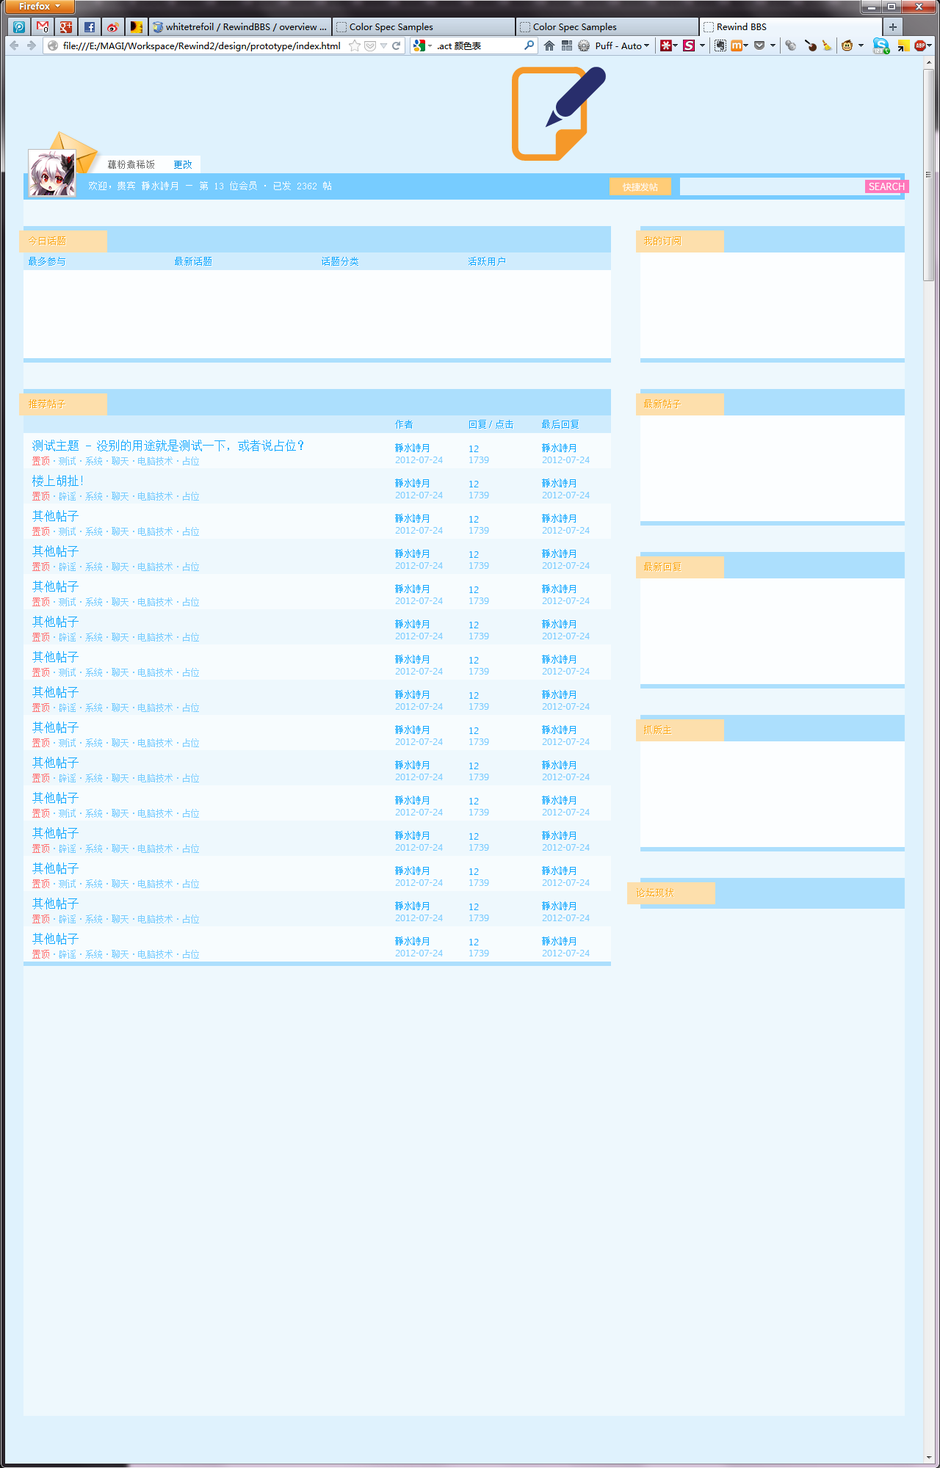
<style>
.page{position:relative;width:940px;height:1468px;background:#eef8fd}
.page>*{position:absolute;margin:0}
.t1{font:9.5px "SimSun";color:#6e6e6e}
.t2{font:9.5px "SimSun";color:#008add}
.t3{font:9.5px "SimSun";color:#fcfeff}
.t4{font:8.8px "MicrosoftYaHei";color:#ffffff}
.t5{font:9.8px "EuphemiaCAS";color:#ffffff}
.t6{font:9.5px "SimSun";color:#fca714}
.t7{font:9.8px "SimSun";color:#ffffff}
.t8{font:9.4px "SimSun";color:#fca714;scale:1.03 1}
.t9{font:9.4px "SimSun";color:#ffffff;scale:1.03 1}
.t10{font:9.8px "SimSun";color:#12a8ff}
.t11{font:9.8px "SimSun";color:#fca714}
.t12{font:9.8px "ArialMT";color:#12a8ff}
.t13{font:9.8px "ArialMT";color:#ffffff}
.t14{font:11.7px "SimSun";color:#12a8ff}
.t15{font:8.8px "SimSun";color:#12a8ff}
.t16{font:9px "EuphemiaCAS";color:#12a8ff}
.t17{font:8.8px "SimSun";color:#77ccff}
.t18{font:8.8px "SimSun";color:#ff7777}
.t19{font:9px "EuphemiaCAS";color:#77ccff}
</style>
<div class="page">
<p class="t1" style="left:108px;top:160px;width:46px;height:9px">藕粉煮稀饭</p>
<p class="t2" style="left:174px;top:160px;width:18px;height:9px">更改</p>
<p class="t3" style="left:89px;top:181px;width:242px;height:9px">欢迎，贵宾 靜水詩月 — 第 13 位会员·已发 2362 帖</p>
<p class="t4" style="left:622px;top:183px;width:36px;height:9px">快捷发帖</p>
<p class="t5" style="left:868px;top:183px;width:36px;height:7px">SEARCH</p>
<p class="t6" style="left:29px;top:236px;width:36px;height:9px">今日话题</p>
<p class="t7" style="left:29px;top:237px;width:37px;height:9px">今日话题</p>
<p class="t8" style="left:644px;top:236px;width:36px;height:9px">我的订阅</p>
<p class="t9" style="left:644px;top:237px;width:37px;height:9px">我的订阅</p>
<p class="t10" style="left:29px;top:257px;width:36px;height:9px">最多参与</p>
<p class="t10" style="left:175px;top:257px;width:36px;height:9px">最新话题</p>
<p class="t7" style="left:175px;top:258px;width:37px;height:8px">最新话题</p>
<p class="t10" style="left:322px;top:257px;width:36px;height:9px">话题分类</p>
<p class="t10" style="left:468px;top:257px;width:37px;height:9px">活跃用户</p>
<p class="t11" style="left:29px;top:399px;width:36px;height:9px">推荐帖子</p>
<p class="t7" style="left:29px;top:400px;width:37px;height:9px">推荐帖子</p>
<p class="t11" style="left:644px;top:399px;width:36px;height:9px">最新帖子</p>
<p class="t7" style="left:644px;top:400px;width:37px;height:9px">最新帖子</p>
<p class="t10" style="left:395px;top:420px;width:18px;height:9px">作者</p>
<p class="t7" style="left:396px;top:421px;width:17px;height:8px">作者</p>
<p class="t10" style="left:469px;top:420px;width:44px;height:9px">回复<span class="t12">/</span>点击</p>
<p class="t7" style="left:470px;top:421px;width:44px;height:8px">回复<span class="t13">/</span>点击</p>
<p class="t10" style="left:542px;top:420px;width:36px;height:9px">最后回复</p>
<p class="t7" style="left:542px;top:421px;width:37px;height:8px">最后回复</p>
<p class="t14" style="left:32px;top:440px;width:271px;height:11px">测试主题 - 没别的用途就是测试一下，或者说占位？</p>
<p class="t15" style="left:395px;top:443px;width:34px;height:9px">靜水詩月</p>
<p class="t16" style="left:469px;top:446px;width:10px;height:6px">12</p>
<p class="t15" style="left:542px;top:443px;width:33px;height:9px">靜水詩月</p>
<p class="t17" style="left:32px;top:457px;width:167px;height:8px"><span class="t18">置顶</span>·测试·系统·聊天·电脑技术·占位</p>
<p class="t19" style="left:395px;top:457px;width:48px;height:6px">2012-07-24</p>
<p class="t19" style="left:469px;top:457px;width:20px;height:6px">1739</p>
<p class="t19" style="left:542px;top:457px;width:47px;height:6px">2012-07-24</p>
<p class="t14" style="left:32px;top:475px;width:50px;height:12px">楼上胡扯！</p>
<p class="t15" style="left:395px;top:479px;width:34px;height:8px">靜水詩月</p>
<p class="t16" style="left:469px;top:481px;width:10px;height:6px">12</p>
<p class="t15" style="left:542px;top:479px;width:33px;height:8px">靜水詩月</p>
<p class="t17" style="left:32px;top:492px;width:167px;height:9px"><span class="t18">置顶</span>·辟谣·系统·聊天·电脑技术·占位</p>
<p class="t19" style="left:395px;top:492px;width:48px;height:6px">2012-07-24</p>
<p class="t19" style="left:469px;top:492px;width:20px;height:6px">1739</p>
<p class="t19" style="left:542px;top:492px;width:47px;height:6px">2012-07-24</p>
<p class="t14" style="left:32px;top:510px;width:47px;height:12px">其他帖子</p>
<p class="t15" style="left:395px;top:514px;width:34px;height:9px">靜水詩月</p>
<p class="t16" style="left:469px;top:516px;width:10px;height:7px">12</p>
<p class="t15" style="left:542px;top:514px;width:33px;height:9px">靜水詩月</p>
<p class="t17" style="left:32px;top:527px;width:167px;height:9px"><span class="t18">置顶</span>·测试·系统·聊天·电脑技术·占位</p>
<p class="t19" style="left:395px;top:527px;width:48px;height:7px">2012-07-24</p>
<p class="t19" style="left:469px;top:527px;width:20px;height:7px">1739</p>
<p class="t19" style="left:542px;top:527px;width:47px;height:7px">2012-07-24</p>
<p class="t14" style="left:32px;top:545px;width:47px;height:12px">其他帖子</p>
<p class="t15" style="left:395px;top:549px;width:34px;height:9px">靜水詩月</p>
<p class="t16" style="left:469px;top:551px;width:10px;height:7px">12</p>
<p class="t15" style="left:542px;top:549px;width:33px;height:9px">靜水詩月</p>
<p class="t17" style="left:32px;top:562px;width:167px;height:9px"><span class="t18">置顶</span>·辟谣·系统·聊天·电脑技术·占位</p>
<p class="t19" style="left:395px;top:562px;width:48px;height:7px">2012-07-24</p>
<p class="t19" style="left:469px;top:562px;width:20px;height:7px">1739</p>
<p class="t19" style="left:542px;top:562px;width:47px;height:7px">2012-07-24</p>
<p class="t11" style="left:644px;top:562px;width:36px;height:9px">最新回复</p>
<p class="t7" style="left:644px;top:563px;width:37px;height:9px">最新回复</p>
<p class="t14" style="left:32px;top:581px;width:47px;height:11px">其他帖子</p>
<p class="t15" style="left:395px;top:584px;width:34px;height:9px">靜水詩月</p>
<p class="t16" style="left:469px;top:586px;width:10px;height:7px">12</p>
<p class="t15" style="left:542px;top:584px;width:33px;height:9px">靜水詩月</p>
<p class="t17" style="left:32px;top:598px;width:167px;height:8px"><span class="t18">置顶</span>·测试·系统·聊天·电脑技术·占位</p>
<p class="t19" style="left:395px;top:598px;width:48px;height:6px">2012-07-24</p>
<p class="t19" style="left:469px;top:598px;width:20px;height:6px">1739</p>
<p class="t19" style="left:542px;top:598px;width:47px;height:6px">2012-07-24</p>
<p class="t14" style="left:32px;top:616px;width:47px;height:12px">其他帖子</p>
<p class="t15" style="left:395px;top:620px;width:34px;height:8px">靜水詩月</p>
<p class="t16" style="left:469px;top:622px;width:10px;height:6px">12</p>
<p class="t15" style="left:542px;top:620px;width:33px;height:8px">靜水詩月</p>
<p class="t17" style="left:32px;top:633px;width:167px;height:9px"><span class="t18">置顶</span>·辟谣·系统·聊天·电脑技术·占位</p>
<p class="t19" style="left:395px;top:633px;width:48px;height:6px">2012-07-24</p>
<p class="t19" style="left:469px;top:633px;width:20px;height:6px">1739</p>
<p class="t19" style="left:542px;top:633px;width:47px;height:6px">2012-07-24</p>
<p class="t14" style="left:32px;top:651px;width:47px;height:12px">其他帖子</p>
<p class="t15" style="left:395px;top:655px;width:34px;height:9px">靜水詩月</p>
<p class="t16" style="left:469px;top:657px;width:10px;height:7px">12</p>
<p class="t15" style="left:542px;top:655px;width:33px;height:9px">靜水詩月</p>
<p class="t17" style="left:32px;top:668px;width:167px;height:9px"><span class="t18">置顶</span>·测试·系统·聊天·电脑技术·占位</p>
<p class="t19" style="left:395px;top:668px;width:48px;height:7px">2012-07-24</p>
<p class="t19" style="left:469px;top:668px;width:20px;height:7px">1739</p>
<p class="t19" style="left:542px;top:668px;width:47px;height:7px">2012-07-24</p>
<p class="t14" style="left:32px;top:686px;width:47px;height:12px">其他帖子</p>
<p class="t15" style="left:395px;top:690px;width:34px;height:9px">靜水詩月</p>
<p class="t15" style="left:542px;top:690px;width:33px;height:9px">靜水詩月</p>
<p class="t16" style="left:469px;top:692px;width:10px;height:7px">12</p>
<p class="t17" style="left:32px;top:703px;width:167px;height:9px"><span class="t18">置顶</span>·辟谣·系统·聊天·电脑技术·占位</p>
<p class="t19" style="left:395px;top:703px;width:48px;height:7px">2012-07-24</p>
<p class="t19" style="left:469px;top:703px;width:20px;height:7px">1739</p>
<p class="t19" style="left:542px;top:703px;width:47px;height:7px">2012-07-24</p>
<p class="t14" style="left:32px;top:722px;width:47px;height:11px">其他帖子</p>
<p class="t15" style="left:395px;top:725px;width:34px;height:9px">靜水詩月</p>
<p class="t15" style="left:542px;top:725px;width:33px;height:9px">靜水詩月</p>
<p class="t11" style="left:644px;top:725px;width:27px;height:9px">抓版主</p>
<p class="t7" style="left:644px;top:726px;width:28px;height:9px">抓版主</p>
<p class="t16" style="left:469px;top:727px;width:10px;height:7px">12</p>
<p class="t17" style="left:32px;top:738px;width:167px;height:9px"><span class="t18">置顶</span>·测试·系统·聊天·电脑技术·占位</p>
<p class="t19" style="left:395px;top:738px;width:48px;height:7px">2012-07-24</p>
<p class="t19" style="left:469px;top:738px;width:20px;height:7px">1739</p>
<p class="t19" style="left:542px;top:738px;width:47px;height:7px">2012-07-24</p>
<p class="t14" style="left:32px;top:757px;width:47px;height:12px">其他帖子</p>
<p class="t15" style="left:395px;top:760px;width:34px;height:9px">靜水詩月</p>
<p class="t15" style="left:542px;top:760px;width:33px;height:9px">靜水詩月</p>
<p class="t17" style="left:32px;top:774px;width:167px;height:8px"><span class="t18">置顶</span>·辟谣·系统·聊天·电脑技术·占位</p>
<p class="t19" style="left:395px;top:774px;width:48px;height:6px">2012-07-24</p>
<p class="t16" style="left:469px;top:763px;width:10px;height:6px">12</p>
<p class="t19" style="left:469px;top:774px;width:20px;height:6px">1739</p>
<p class="t19" style="left:542px;top:774px;width:47px;height:6px">2012-07-24</p>
<p class="t14" style="left:32px;top:792px;width:47px;height:12px">其他帖子</p>
<p class="t15" style="left:395px;top:796px;width:34px;height:9px">靜水詩月</p>
<p class="t16" style="left:469px;top:798px;width:10px;height:7px">12</p>
<p class="t15" style="left:542px;top:796px;width:33px;height:9px">靜水詩月</p>
<p class="t17" style="left:32px;top:809px;width:167px;height:9px"><span class="t18">置顶</span>·测试·系统·聊天·电脑技术·占位</p>
<p class="t19" style="left:395px;top:809px;width:48px;height:7px">2012-07-24</p>
<p class="t19" style="left:469px;top:809px;width:20px;height:7px">1739</p>
<p class="t19" style="left:542px;top:809px;width:47px;height:7px">2012-07-24</p>
<p class="t14" style="left:32px;top:827px;width:47px;height:12px">其他帖子</p>
<p class="t15" style="left:395px;top:831px;width:34px;height:9px">靜水詩月</p>
<p class="t16" style="left:469px;top:833px;width:10px;height:7px">12</p>
<p class="t15" style="left:542px;top:831px;width:33px;height:9px">靜水詩月</p>
<p class="t17" style="left:32px;top:844px;width:167px;height:9px"><span class="t18">置顶</span>·辟谣·系统·聊天·电脑技术·占位</p>
<p class="t19" style="left:395px;top:844px;width:48px;height:7px">2012-07-24</p>
<p class="t19" style="left:469px;top:844px;width:20px;height:7px">1739</p>
<p class="t19" style="left:542px;top:844px;width:47px;height:7px">2012-07-24</p>
<p class="t14" style="left:32px;top:862px;width:47px;height:12px">其他帖子</p>
<p class="t15" style="left:395px;top:866px;width:34px;height:9px">靜水詩月</p>
<p class="t16" style="left:469px;top:868px;width:10px;height:7px">12</p>
<p class="t15" style="left:542px;top:866px;width:33px;height:9px">靜水詩月</p>
<p class="t17" style="left:32px;top:879px;width:167px;height:9px"><span class="t18">置顶</span>·测试·系统·聊天·电脑技术·占位</p>
<p class="t19" style="left:395px;top:879px;width:48px;height:7px">2012-07-24</p>
<p class="t19" style="left:469px;top:879px;width:20px;height:7px">1739</p>
<p class="t19" style="left:542px;top:879px;width:47px;height:7px">2012-07-24</p>
<p class="t11" style="left:636px;top:888px;width:37px;height:9px">论坛现状</p>
<p class="t7" style="left:637px;top:889px;width:37px;height:9px">论坛现状</p>
<p class="t14" style="left:32px;top:898px;width:47px;height:11px">其他帖子</p>
<p class="t15" style="left:395px;top:901px;width:34px;height:9px">靜水詩月</p>
<p class="t16" style="left:469px;top:904px;width:10px;height:6px">12</p>
<p class="t15" style="left:542px;top:901px;width:33px;height:9px">靜水詩月</p>
<p class="t17" style="left:32px;top:915px;width:167px;height:8px"><span class="t18">置顶</span>·辟谣·系统·聊天·电脑技术·占位</p>
<p class="t19" style="left:395px;top:915px;width:48px;height:6px">2012-07-24</p>
<p class="t19" style="left:469px;top:915px;width:20px;height:6px">1739</p>
<p class="t19" style="left:542px;top:915px;width:47px;height:6px">2012-07-24</p>
<p class="t14" style="left:32px;top:933px;width:47px;height:12px">其他帖子</p>
<p class="t15" style="left:395px;top:937px;width:34px;height:8px">靜水詩月</p>
<p class="t16" style="left:469px;top:939px;width:10px;height:6px">12</p>
<p class="t15" style="left:542px;top:937px;width:33px;height:8px">靜水詩月</p>
<p class="t17" style="left:32px;top:950px;width:167px;height:9px"><span class="t18">置顶</span>·辟谣·系统·聊天·电脑技术·占位</p>
<p class="t19" style="left:395px;top:950px;width:48px;height:6px">2012-07-24</p>
<p class="t19" style="left:469px;top:950px;width:20px;height:6px">1739</p>
<p class="t19" style="left:542px;top:950px;width:47px;height:6px">2012-07-24</p>
</div>
